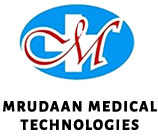
<style>
.page{position:relative;width:158px;height:137px;background:#ffffff}
.page>*{position:absolute;margin:0}
.t1{font:15.3px "AlegreyaSansSC-Bold";letter-spacing:0.07em;color:#000000;text-transform:uppercase;font-weight:bold}
</style>
<div class="page">
<p class="t1" style="left:3px;top:101px;width:154px;height:29px;text-align:center">MRUDAAN MEDICAL<br>TECHNOLOGIES</p>
</div>
